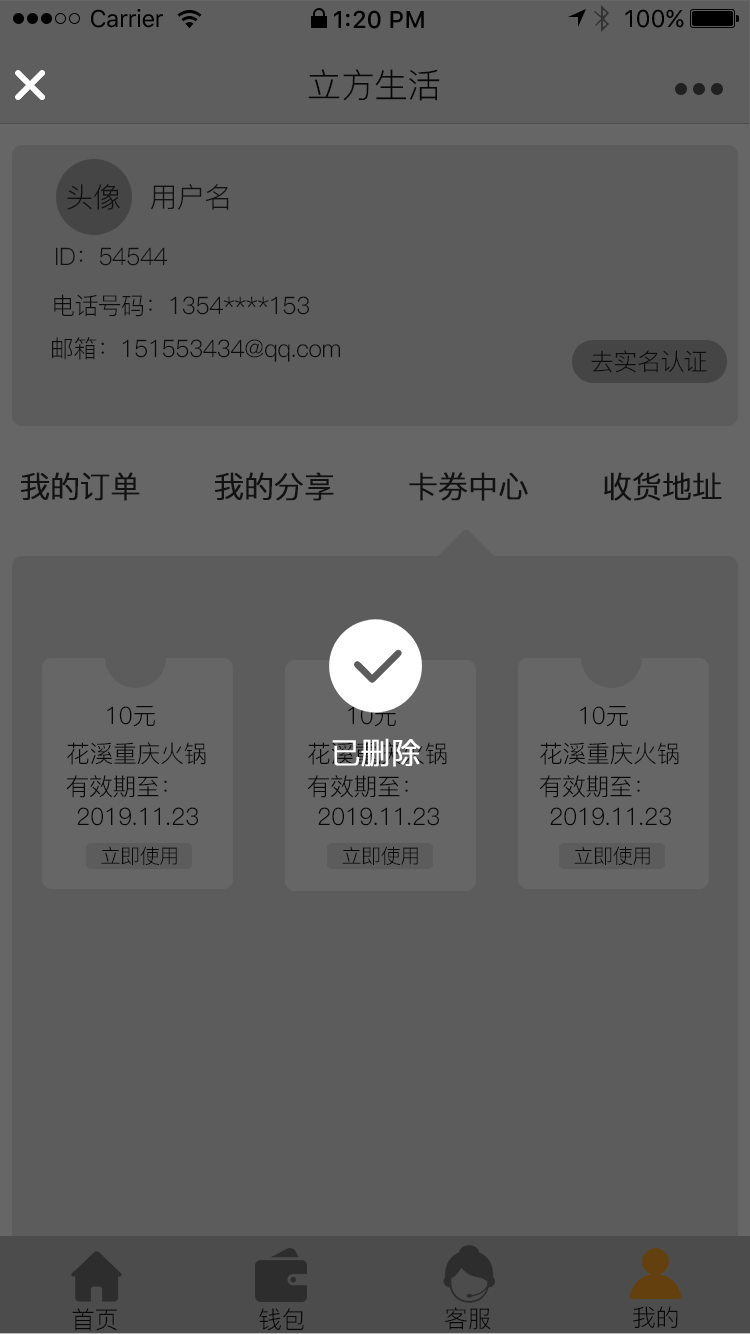
<style>
.page{position:relative;width:750px;height:1334px;background:#5c5c5c}
.page>*{position:absolute;margin:0}
.t1{font:24px "SFUIText-Regular";letter-spacing:-0.025em;color:#000000}
.t2{font:24px "SFUIText-Medium";color:#000000}
.t3{font:24px "SFUIText-Regular";color:#000000}
.t4{font:34px "PingFang-SC-Regular";letter-spacing:-0.02em;color:#141414}
.t5{font:28px "PingFang-SC-Regular";letter-spacing:-0.024em;color:#121212}
.t6{font:24px "PingFang-SC-Regular";letter-spacing:-0.024em;color:#121212}
.t7{font:24px "PingFang-SC-Regular";letter-spacing:-0.024em;color:#212121}
.t8{font:30px "PingFang-SC-Regular";letter-spacing:-0.024em;color:#121212;font-weight:bold}
.t9{font:24px "PingFang-SC-Regular";letter-spacing:-0.02em;color:#141414}
.t10{font:30px "PingFang-SC-Regular";letter-spacing:-0.02em;color:#ffffff;font-weight:bold}
.t11{font:20px "PingFang-SC-Regular";letter-spacing:-0.02em;color:#141414}
</style>
<div class="page">
<p class="t1" style="left:91px;top:9px;width:72px;height:19px">Carrier</p>
<p class="t2" style="left:334px;top:10px;width:90px;height:19px">1:20 PM</p>
<p class="t3" style="left:625px;top:9px;width:59px;height:19px">100%</p>
<p class="t4" style="left:308px;top:69px;width:132px;height:32px">立方生活</p>
<p class="t5" style="left:67px;top:184px;width:53px;height:26px">头像</p>
<p class="t5" style="left:150px;top:184px;width:79px;height:26px">用户名</p>
<p class="t6" style="left:56px;top:247px;width:112px;height:19px">ID：54544</p>
<p class="t7" style="left:54px;top:294px;width:255px;height:23px">电话号码：1354****153</p>
<p class="t7" style="left:52px;top:337px;width:288px;height:25px">邮箱：151553434@qq.com</p>
<p class="t7" style="left:591px;top:350px;width:116px;height:23px">去实名认证</p>
<p class="t8" style="left:21px;top:472px;width:119px;height:29px">我的订单</p>
<p class="t8" style="left:215px;top:472px;width:119px;height:29px">我的分享</p>
<p class="t8" style="left:409px;top:472px;width:119px;height:29px">卡券中心</p>
<p class="t8" style="left:604px;top:472px;width:118px;height:29px">收货地址</p>
<p class="t9" style="left:107px;top:706px;width:48px;height:21px">10元</p>
<p class="t9" style="left:580px;top:706px;width:48px;height:21px">10元</p>
<p class="t9" style="left:67px;top:742px;width:139px;height:23px">花溪重庆火锅</p>
<p class="t10" style="left:332px;top:738px;width:89px;height:29px">已删除</p>
<p class="t9" style="left:540px;top:742px;width:139px;height:23px">花溪重庆火锅</p>
<p class="t9" style="left:66px;top:775px;width:101px;height:23px">有效期至：</p>
<p class="t9" style="left:307px;top:775px;width:101px;height:23px">有效期至：</p>
<p class="t9" style="left:539px;top:775px;width:101px;height:23px">有效期至：</p>
<p class="t9" style="left:77px;top:807px;width:121px;height:19px">2019.11.23</p>
<p class="t9" style="left:318px;top:807px;width:121px;height:19px">2019.11.23</p>
<p class="t9" style="left:550px;top:807px;width:121px;height:19px">2019.11.23</p>
<p class="t11" style="left:101px;top:846px;width:76px;height:19px">立即使用</p>
<p class="t11" style="left:342px;top:846px;width:76px;height:19px">立即使用</p>
<p class="t11" style="left:574px;top:846px;width:76px;height:19px">立即使用</p>
<p class="t9" style="left:72px;top:1308px;width:45px;height:23px">首页</p>
<p class="t9" style="left:259px;top:1308px;width:45px;height:23px">钱包</p>
<p class="t9" style="left:445px;top:1307px;width:46px;height:23px">客服</p>
<p class="t9" style="left:633px;top:1306px;width:45px;height:22px">我的</p>
</div>
